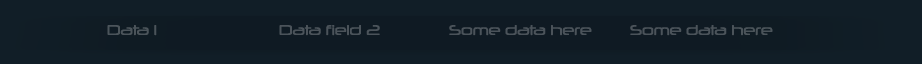
<style>
.page{position:relative;width:922px;height:64px;background:#111e27}
.page>*{position:absolute;margin:0}
.t1{font:13.6px "Neuropol-Regular";color:#4b545a}
.t2{font:13.6px "Neuropol-Regular";color:#4b535a}
</style>
<div class="page">
<p class="t1" style="left:107px;top:25px;width:50px;height:11px">Data 1</p>
<p class="t2" style="left:279px;top:25px;width:101px;height:11px">Data field 2</p>
<p class="t2" style="left:449px;top:25px;width:143px;height:11px">Some data here</p>
<p class="t2" style="left:630px;top:25px;width:143px;height:11px">Some data here</p>
</div>
